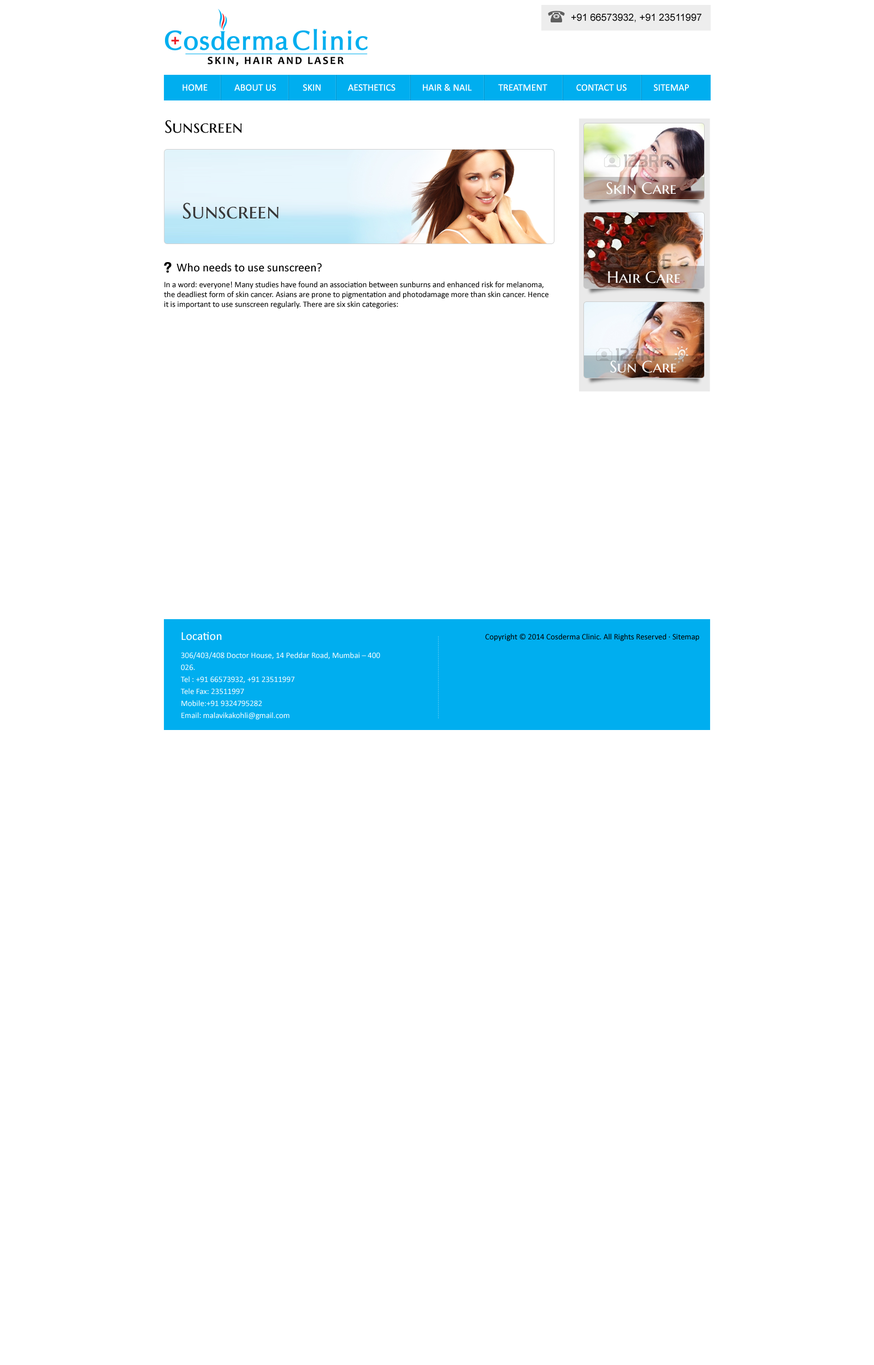
<style>
.page{position:relative;width:874px;height:1365px;background:#ffffff}
.page>*{position:absolute;margin:0}
.t1{font:9.8px "ArialMT";color:#000000}
.t2{font:9.8px "Calibri";color:#ffffff;text-transform:uppercase}
.t3{font:17.5px "MarcellusSC-Regular";color:#000000}
.t4{font:16.4px "MarcellusSC-Regular";color:#feffff}
.t5{font:21.8px "MarcellusSC-Regular";color:#373737}
.t6{font:12px "Calibri";color:#000000}
.t7{font:8.2px "Calibri";color:#000000}
.t8{font:12px "Calibri";color:#ffffff}
.t9{font:7.1px "ArialMT";color:#4dc6f4}
.t10{font:8.2px/12px "Calibri";color:#ffffff}
</style>
<div class="page">
<p class="t1" style="left:571px;top:14px;width:130px;height:8px">+91 66573932, +91 23511997</p>
<p class="t2" style="left:182px;top:84px;width:507px;height:7px">Home            About Us            Skin            Aesthetics            Hair &amp; Nail            Treatment             Contact us            Sitemap</p>
<p class="t3" style="left:165px;top:120px;width:77px;height:13px">Sunscreen</p>
<p class="t4" style="left:606px;top:182px;width:70px;height:12px">Skin Care</p>
<p class="t5" style="left:183px;top:203px;width:95px;height:16px">Sunscreen</p>
<p class="t6" style="left:176px;top:263px;width:146px;height:9px">Who needs to use sunscreen?</p>
<p class="t7" style="left:164px;top:281px;width:384px;height:27px">In a word: everyone! Many studies have found an association between sunburns and enhanced risk for melanoma, the deadliest form of skin cancer. Asians are prone to pigmentation and photodamage more than skin cancer. Hence it is important to use sunscreen regularly. There are six skin categories:</p>
<p class="t4" style="left:608px;top:271px;width:72px;height:12px">Hair Care</p>
<p class="t4" style="left:610px;top:360px;width:66px;height:13px">Sun Care</p>
<p class="t8" style="left:181px;top:632px;width:41px;height:8px">Location</p>
<p class="t9" style="left:438px;top:636px;width:0px;height:83px;rotate:90deg">--------------------------------------</p>
<p class="t7" style="left:485px;top:633px;width:214px;height:8px">Copyright © 2014 Cosderma Clinic. All Rights Reserved · Sitemap</p>
<p class="t10" style="left:181px;top:652px;width:199px;height:68px">306/403/408 Doctor House, 14 Peddar Road, Mumbai – 400 026.<br>Tel : +91 66573932, +91 23511997<br>Tele Fax: 23511997<br>Mobile:+91 9324795282<br>Email: malavikakohli@gmail.com</p>
</div>
